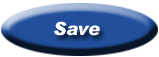
<style>
.page{position:relative;width:159px;height:57px;background:#ffffff}
.page>*{position:absolute;margin:0}
.t1{font:18px "Arial-BlackItalic";color:#ffffff}
</style>
<div class="page">
<p class="t1" style="left:54px;top:21px;width:46px;height:15px">Save</p>
</div>
